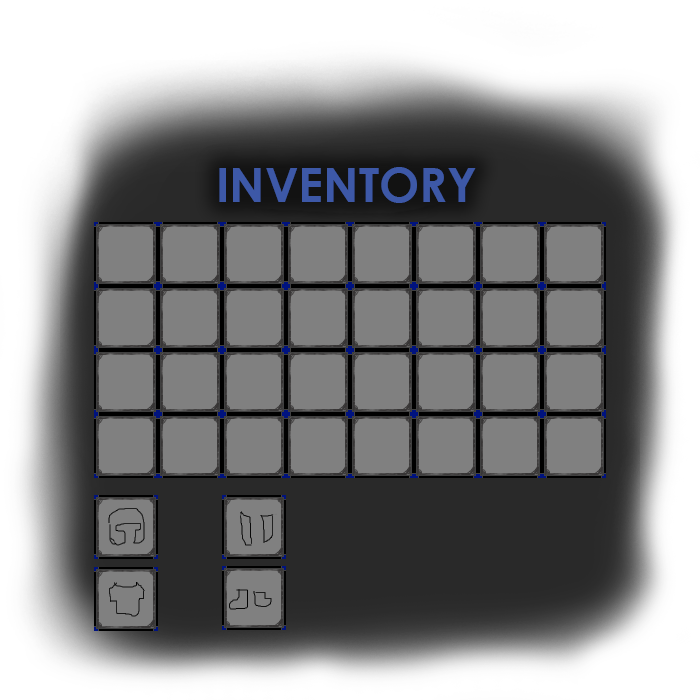
<style>
.page{position:relative;width:700px;height:700px;background:#808080}
.page>*{position:absolute;margin:0}
.t1{font:48px "CenturyGothic-Bold";color:#3d58a7}
</style>
<div class="page">
<p class="t1" style="left:219px;top:167px;width:257px;height:36px">INVENTORY</p>
</div>
